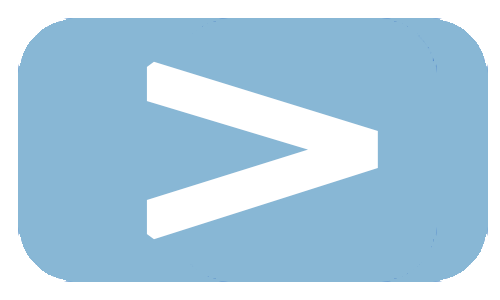
<style>
.page{position:relative;width:500px;height:300px;background:#88b7d5}
.page>*{position:absolute;margin:0}
.t1{font:346px "ArialMT";color:#ffffff;font-weight:bold;scale:1.34 1}
</style>
<div class="page">
<p class="t1" style="left:146px;top:61px;width:232px;height:179px">&gt;</p>
</div>
